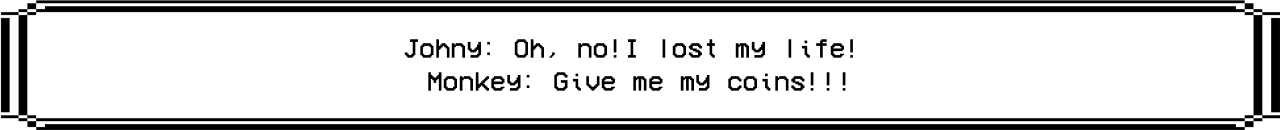
<style>
.page{position:relative;width:1280px;height:130px;background:#ffffff}
.page>*{position:absolute;margin:0}
.t1{font:26.9px "VCROSDMono";color:#000000}
</style>
<div class="page">
<p class="t1" style="left:404px;top:39px;width:449px;height:52px;text-align:center">Johny: Oh, no!I lost my life! <br>Monkey: Give me my coins!!!</p>
</div>
